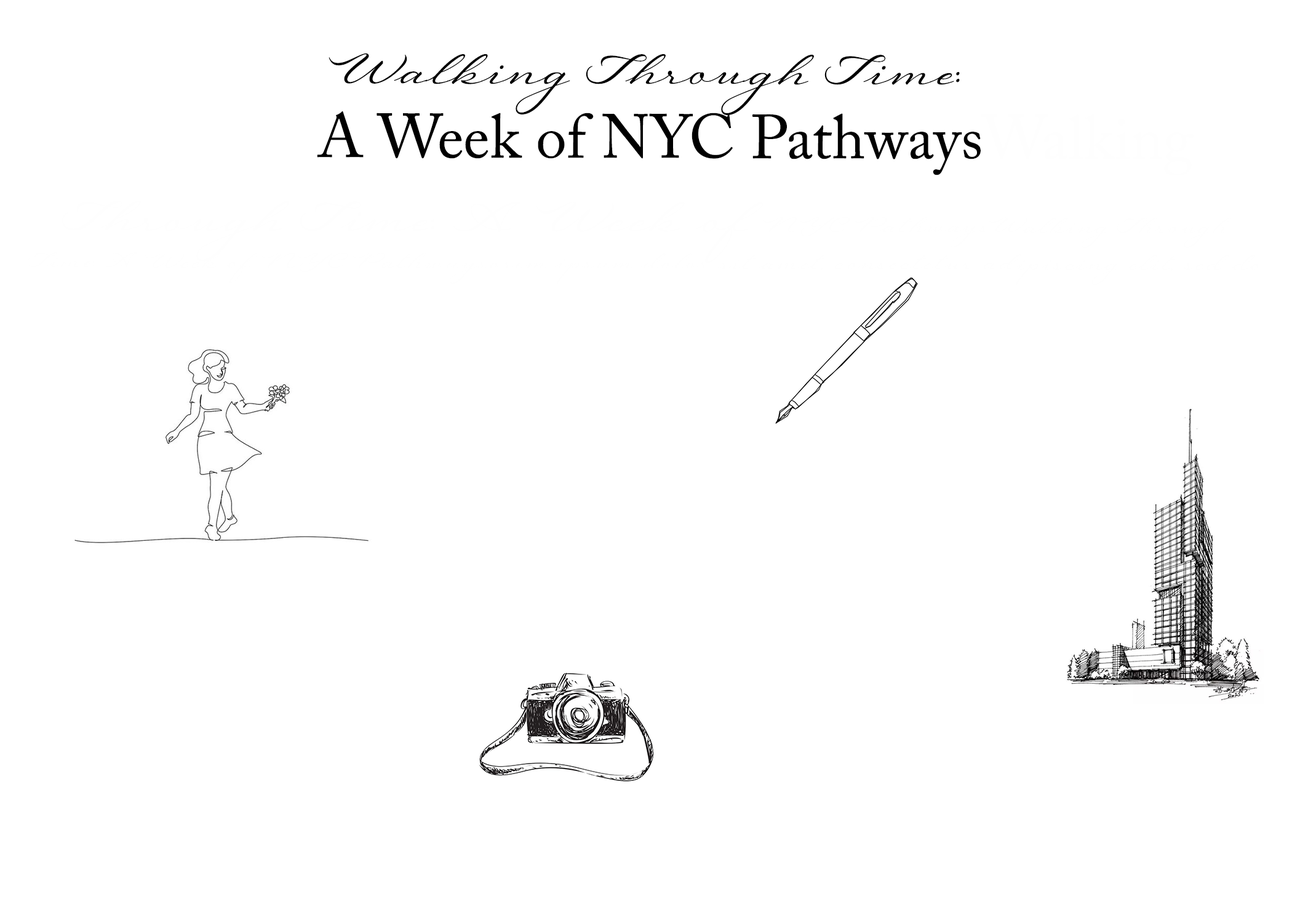
<style>
.page{position:relative;width:1292px;height:923px;background:#ffffff}
.page>*{position:absolute;margin:0}
.t1{font:30.8px "Regina";color:#fefefe}
.t2{font:61.5px "Regina";color:#000000}
.t3{font:61.5px "ACaslonPro-Regular";color:#000000}
.t4{font:61.5px "ACaslonPro-Regular";color:#fefefe}
.t5{font:61.5px "Regina";color:#fefefe}
</style>
<div class="page">
<p class="t1" style="left:27px;top:53px;width:1236px;height:232px;text-align:center"><span class="t2">Walking Through Time:<br>           </span><span class="t3">A Week of NYC Pathways</span><span class="t4">Walking </span><span class="t5">Through Time: A Week of </span>NYC PathwaysWalking Through Time: A Week of NYC Pathwaysorem ipsum dolor sit amet, consectetur adipiscing elit, sed do eiusmod tempor incididunt ut labore et dolore magna aliqua. Quis ipsum suspendisse ultrices gravida. Risus commodo viverra maecenas accumsan lacus vel facilisis.</p>
</div>
